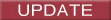
<style>
.page{position:relative;width:111px;height:20px}
.page>*{position:absolute;margin:0}
.t1{font:15.7px "Helvetica";color:#ffffff;scale:1.2 1}
</style>
<div class="page">
<p class="t1" style="left:18px;top:4px;width:74px;height:12px">UPDATE</p>
</div>
